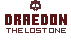
<style>
.page{position:relative;width:71px;height:41px;background:#ffffff}
.page>*{position:absolute;margin:0}
.t1{font:15px "MinecraftTen";letter-spacing:0.022em;color:#571515}
.t2{font:8px "5x5-Pixel";color:#592d2d}
</style>
<div class="page">
<p class="t1" style="left:5px;top:14px;width:7px;height:11px">d</p>
<p class="t1" style="left:14px;top:14px;width:43px;height:11px">raedo</p>
<p class="t1" style="left:59px;top:14px;width:8px;height:11px">n</p>
<p class="t2" style="left:6px;top:28px;width:60px;height:5px">the lost one</p>
</div>
